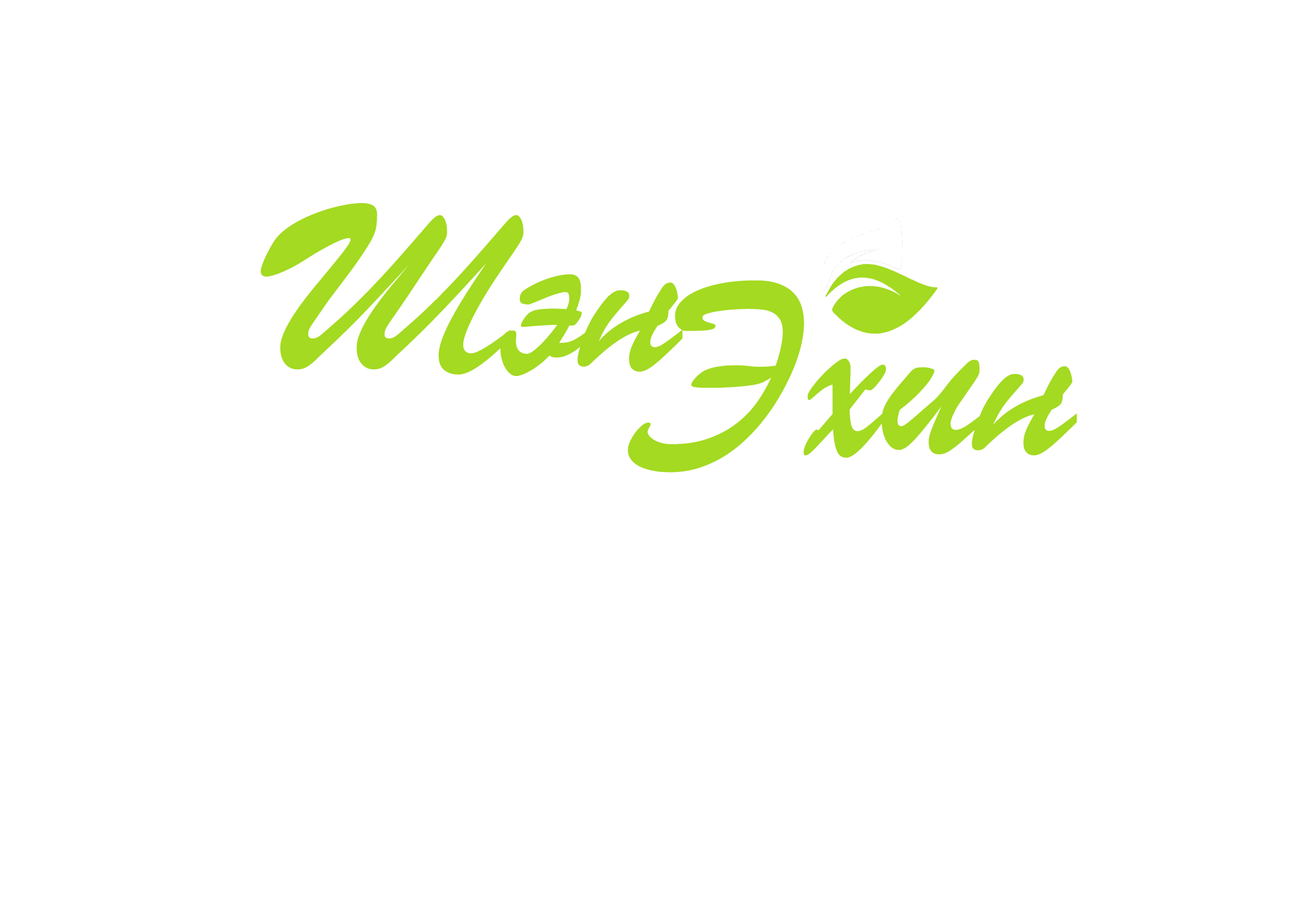
<style>
.page{position:relative;width:1292px;height:923px;background:#ffffff}
.page>*{position:absolute;margin:0}
.t1{font:256.4px "BrushScriptMTRusbyme-Italic";color:#a4da21}
</style>
<div class="page">
<p class="t1" style="left:260px;top:203px;width:423px;height:173px">Шэн</p>
<p class="t1" style="left:628px;top:280px;width:449px;height:193px">Эхин</p>
</div>
